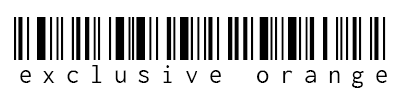
<style>
.page{position:relative;width:400px;height:100px;background:#ffffff}
.page>*{position:absolute;margin:0}
.t1{font:72px "LibreBarcode128Text-Regular";color:#000000}
</style>
<div class="page">
<p class="t1" style="left:14px;top:17px;width:373px;height:71px">exclusive orange</p>
</div>
